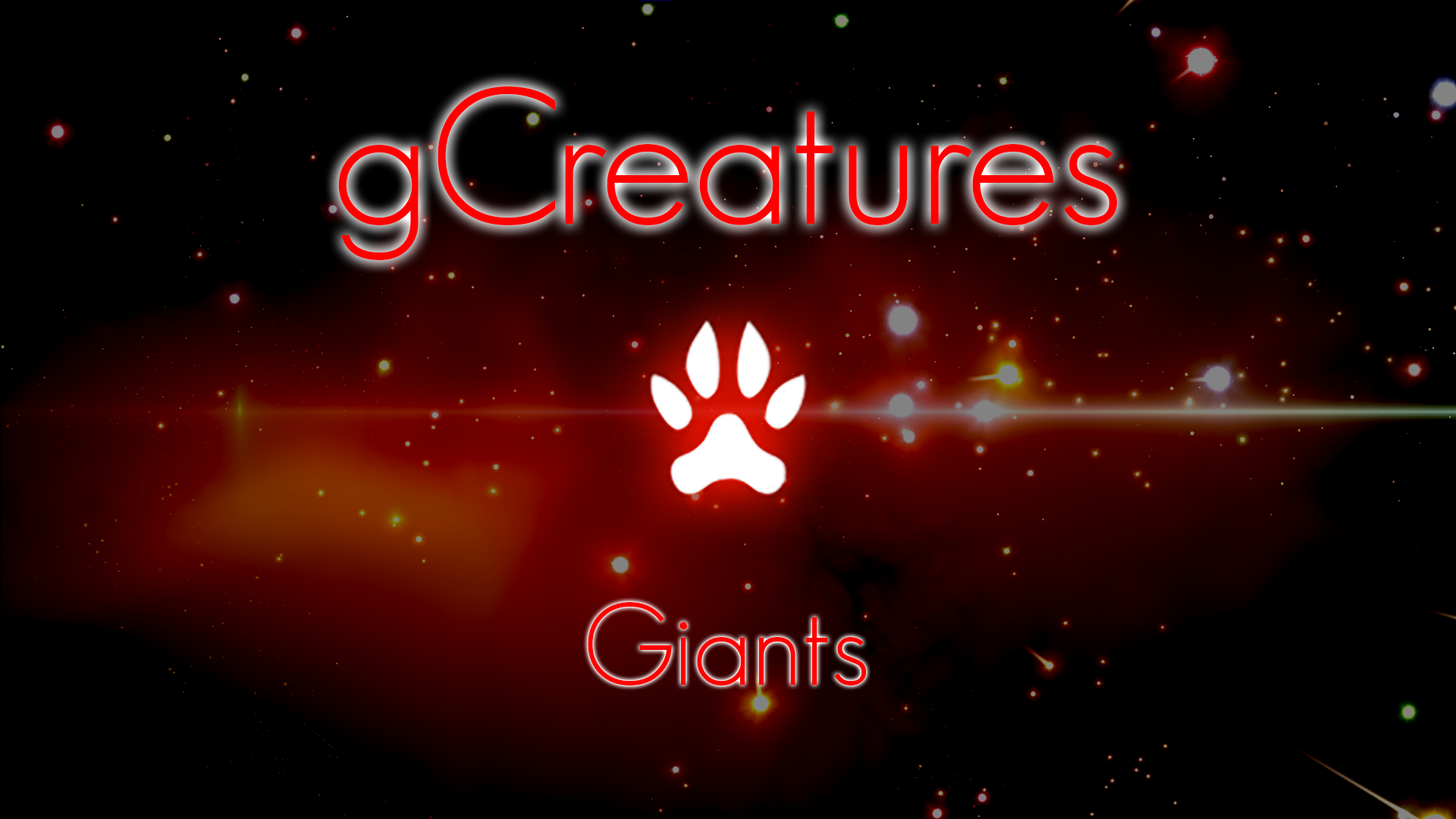
<style>
.page{position:relative;width:1456px;height:819px;background:#000000}
.page>*{position:absolute;margin:0}
.t1{font:189.6px "GeosansLight-NMS";color:#ff0000}
.t2{font:113.7px "GeosansLight-NMS";color:#ff0000}
</style>
<div class="page">
<p class="t1" style="left:338px;top:86px;width:780px;height:174px">gCreatures</p>
<p class="t2" style="left:588px;top:602px;width:279px;height:84px">Giants</p>
</div>
